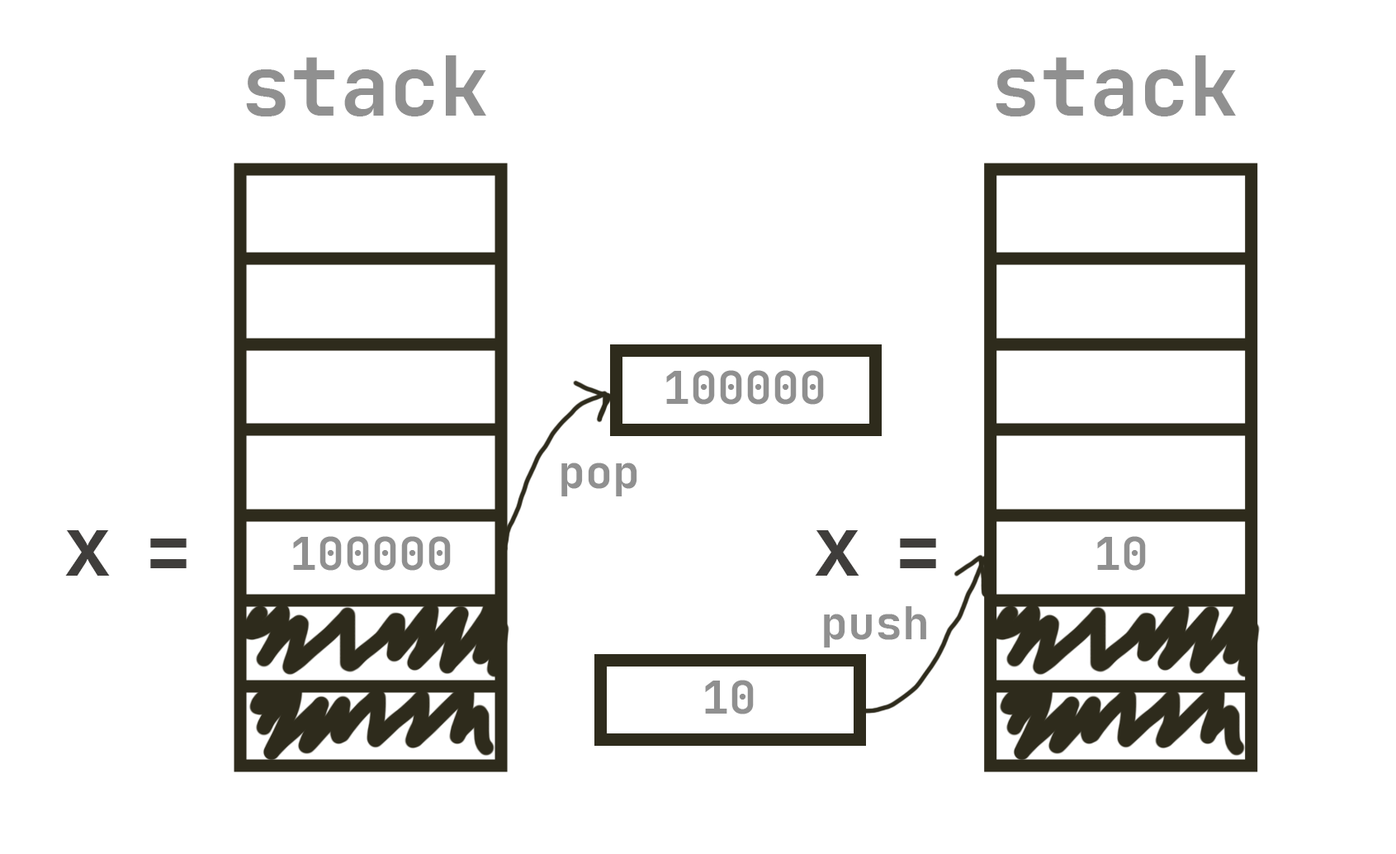
<style>
.page{position:relative;width:1396px;height:854px;background:#ffffff}
.page>*{position:absolute;margin:0}
.t1{font:82.6px "JetBrainsMono-Bold";color:#909090}
.t2{font:45.4px "JetBrainsMono-Bold";color:#909090}
.t3{font:82.6px "JetBrainsMono-Bold";letter-spacing:0.3em;color:#3f3d3b}
</style>
<div class="page">
<p class="t1" style="left:246px;top:55px;width:240px;height:61px">stack</p>
<p class="t1" style="left:996px;top:55px;width:240px;height:61px">stack</p>
<p class="t2" style="left:666px;top:370px;width:158px;height:35px">100000</p>
<p class="t2" style="left:562px;top:462px;width:76px;height:34px">pop</p>
<p class="t3" style="left:65px;top:530px;width:45px;height:46px">x</p>
<p class="t3" style="left:815px;top:530px;width:45px;height:46px">x</p>
<p class="t3" style="left:150px;top:538px;width:37px;height:30px">=</p>
<p class="t2" style="left:293px;top:536px;width:158px;height:35px">100000</p>
<p class="t3" style="left:900px;top:538px;width:36px;height:30px">=</p>
<p class="t2" style="left:1098px;top:536px;width:48px;height:35px">10</p>
<p class="t2" style="left:824px;top:606px;width:103px;height:41px">push</p>
<p class="t2" style="left:705px;top:680px;width:49px;height:34px">10</p>
</div>
